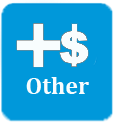
<style>
.page{position:relative;width:114px;height:122px;background:#0098da}
.page>*{position:absolute;margin:0}
.t1{font:24px "Cambria-Bold";color:#f8fcfe}
</style>
<div class="page">
<p class="t1" style="left:26px;top:77px;width:63px;height:17px">Other</p>
</div>
